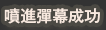
<style>
.page{position:relative;width:106px;height:30px;background:#4b4943}
.page>*{position:absolute;margin:0}
.t1{font:16px "GothicMB101Pr6N-Medium";color:#f8e9df}
</style>
<div class="page">
<p class="t1" style="left:4px;top:8px;width:96px;height:16px">噴進彈幕成功</p>
</div>
